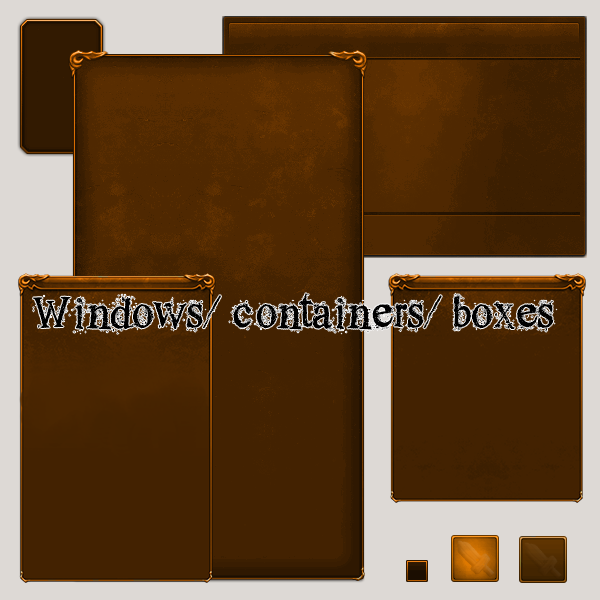
<style>
.page{position:relative;width:600px;height:600px;background:#432201}
.page>*{position:absolute;margin:0}
.t1{font:44px "OldDreams";color:#000000}
</style>
<div class="page">
<p class="t1" style="left:33px;top:293px;width:524px;height:41px">Windows/ containers/ boxes</p>
</div>
